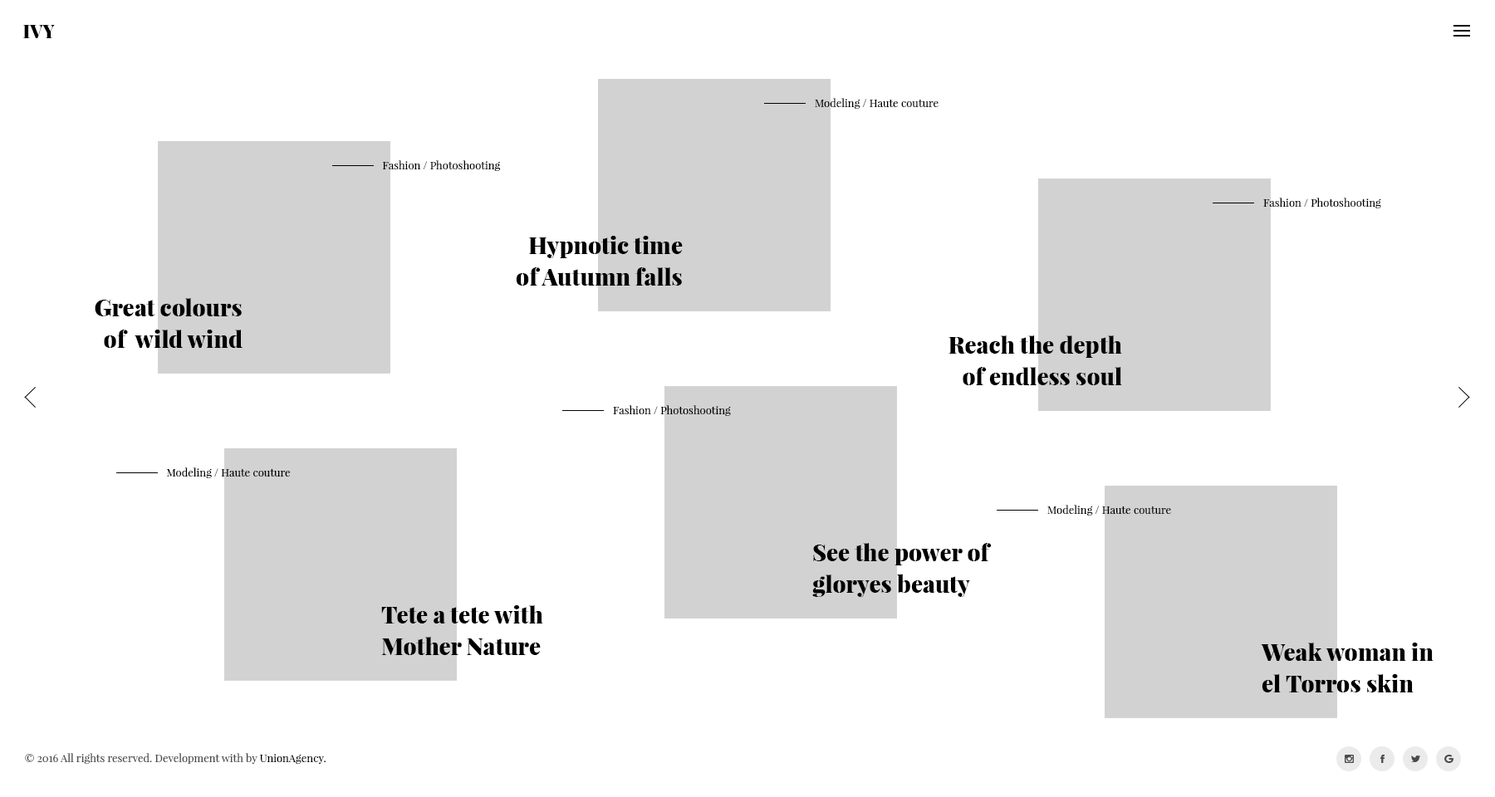
<style>
.page{position:relative;width:1495px;height:797px;background:#ffffff}
.page>*{position:absolute;margin:0}
.t1{font:18.3px "PlayfairDisplay-Black";color:#000000}
.t2{font:10.8px "PlayfairDisplay-Regular";color:#000000}
.t3{font:23.3px/31.6px "PlayfairDisplay-Black";color:#000000}
.t4{font:10.8px "PlayfairDisplay-Regular";color:#494949}
</style>
<div class="page">
<p class="t1" style="left:23px;top:25px;width:32px;height:13px">IVY</p>
<p class="t2" style="left:815px;top:98px;width:124px;height:11px">Modeling / Haute couture</p>
<p class="t2" style="left:382px;top:160px;width:119px;height:11px">Fashion / Photoshooting</p>
<p class="t2" style="left:1263px;top:198px;width:118px;height:11px">Fashion / Photoshooting</p>
<p class="t3" style="left:516px;top:236px;width:167px;height:50px;text-align:right">Hypnotic time<br>of Autumn falls</p>
<p class="t3" style="left:95px;top:298px;width:148px;height:50px;text-align:right">Great colours<br>of  wild wind</p>
<p class="t3" style="left:949px;top:336px;width:173px;height:49px;text-align:right">Reach the depth<br>of endless soul</p>
<p class="t2" style="left:613px;top:405px;width:118px;height:11px">Fashion / Photoshooting</p>
<p class="t2" style="left:166px;top:468px;width:125px;height:10px">Modeling / Haute couture</p>
<p class="t2" style="left:1048px;top:505px;width:123px;height:11px">Modeling / Haute couture</p>
<p class="t3" style="left:812px;top:543px;width:180px;height:54px">See the power of<br>gloryes beauty</p>
<p class="t3" style="left:381px;top:606px;width:162px;height:49px">Tete a tete with<br>Mother Nature</p>
<p class="t3" style="left:1261px;top:643px;width:173px;height:50px">Weak woman in<br>el Torros skin</p>
<p class="t4" style="left:25px;top:753px;width:301px;height:11px">© 2016 All rights reserved. Development with by <span class="t2">UnionAgency.</span></p>
</div>
